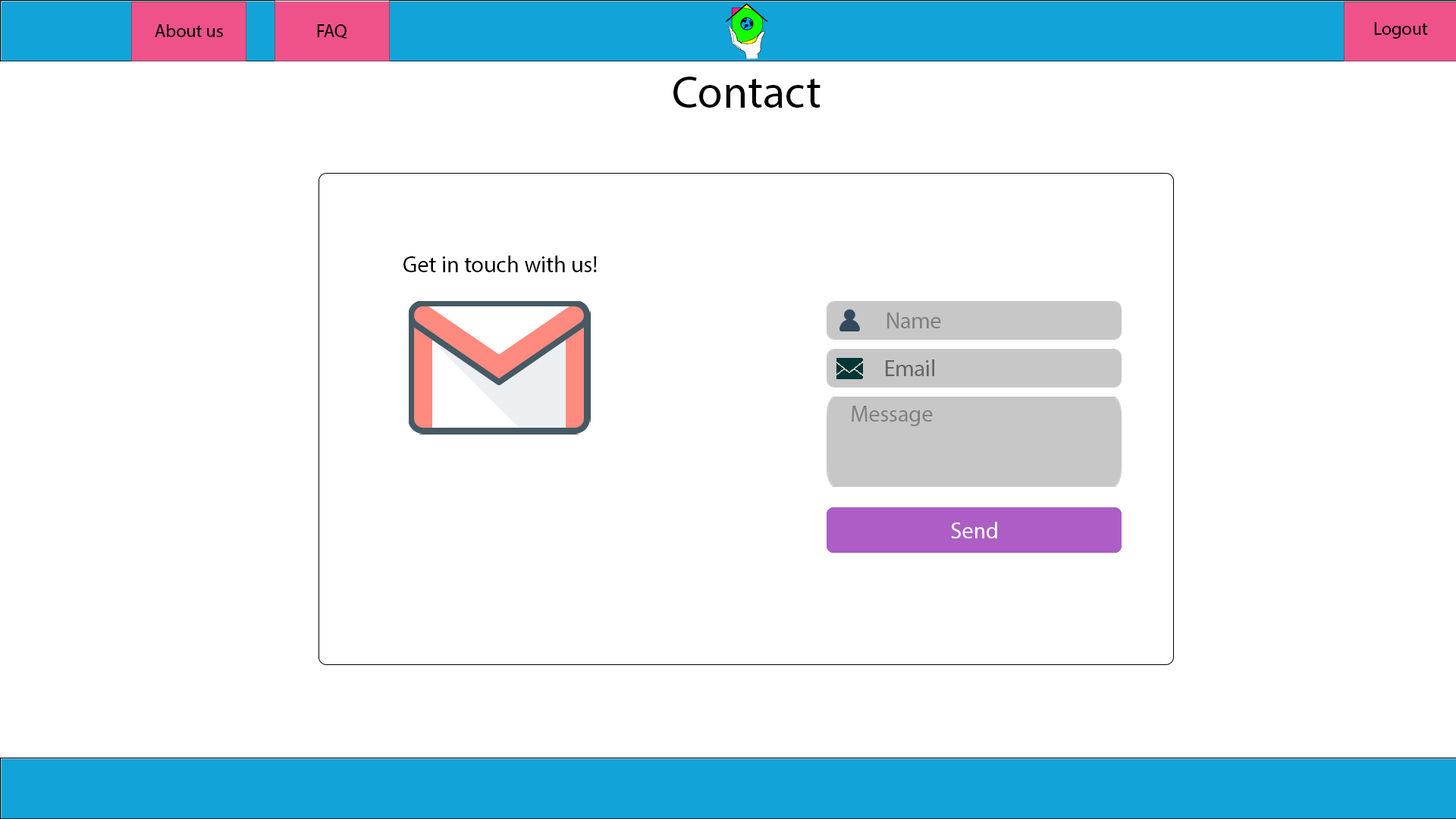
<style>
.page{position:relative;width:1456px;height:819px;background:#ffffff}
.page>*{position:absolute;margin:0}
.t1{font:18.2px "MyriadPro-Regular";color:#000000}
.t2{font:45.5px "MyriadPro-Regular";color:#000000}
.t3{font:22.7px "MyriadPro-Regular";color:#000000}
.t4{font:22.7px "MyriadPro-Regular";color:#808080}
.t5{font:22.7px "MyriadPro-Regular";color:#646464}
.t6{font:22.7px "MyriadPro-Regular";color:#ffffff}
</style>
<div class="page">
<p class="t1" style="left:155px;top:24px;width:68px;height:13px">About us</p>
<p class="t1" style="left:317px;top:24px;width:30px;height:15px">FAQ</p>
<p class="t1" style="left:1374px;top:22px;width:54px;height:17px">Logout</p>
<p class="t2" style="left:673px;top:77px;width:148px;height:31px">Contact</p>
<p class="t3" style="left:403px;top:256px;width:194px;height:16px">Get in touch with us!</p>
<p class="t4" style="left:887px;top:312px;width:54px;height:16px">Name</p>
<p class="t5" style="left:886px;top:359px;width:48px;height:17px">Email</p>
<p class="t4" style="left:852px;top:406px;width:81px;height:20px">Message</p>
<p class="t6" style="left:951px;top:522px;width:46px;height:16px">Send</p>
</div>
